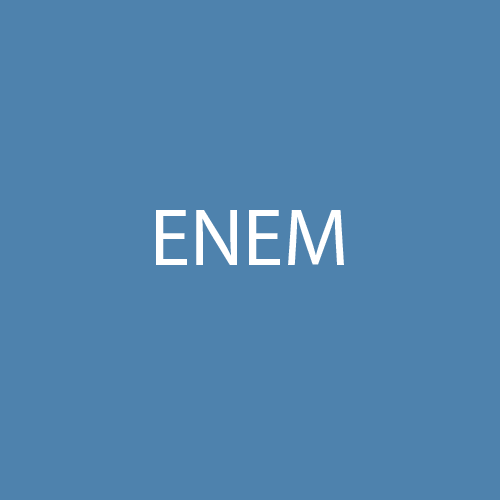
<style>
.page{position:relative;width:500px;height:500px;background:#4e82ad}
.page>*{position:absolute;margin:0}
.t1{font:81.3px "MyriadPro-Regular";color:#ffffff}
</style>
<div class="page">
<p class="t1" style="left:156px;top:210px;width:188px;height:55px">ENEM</p>
</div>
